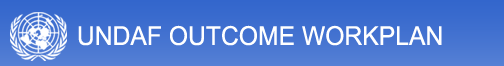
<style>
.page{position:relative;width:504px;height:66px}
.page>*{position:absolute;margin:0}
.t1{font:26px "ArialMT";color:#ffffff;scale:0.95 1}
</style>
<div class="page">
<p class="t1" style="left:78px;top:25px;width:364px;height:21px">UNDAF OUTCOME WORKPLAN</p>
</div>
